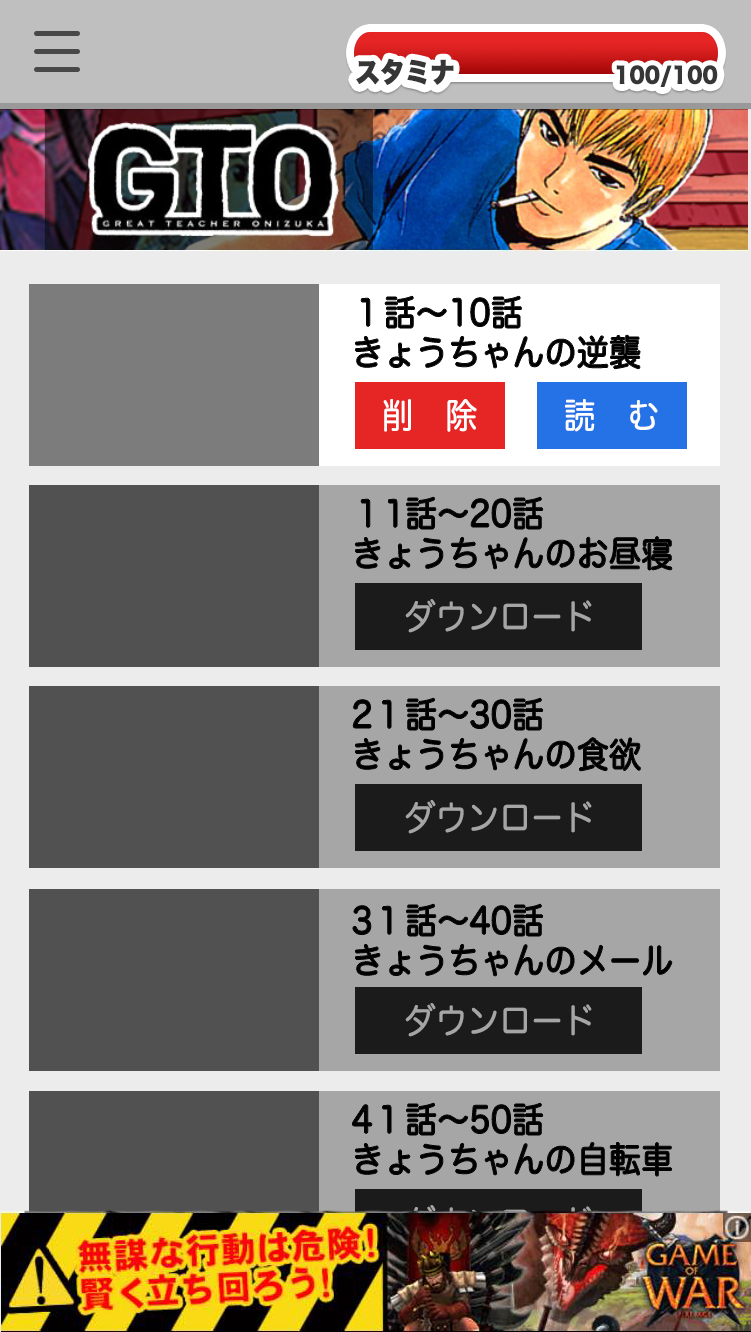
<style>
.page{position:relative;width:751px;height:1332px}
.page>*{position:absolute;margin:0}
.t1{font:27.3px "HiraKakuStdN-W8";color:#363636;font-weight:bold;scale:0.89 1}
.t2{font:21.7px "HiraKakuStdN-W8";color:#363636;font-weight:bold;scale:0.89 1}
.t3{font:35px/40px "HiraMaruProN-W4";color:#000000;font-weight:bold;scale:0.9 1}
.t4{font:34.7px "HiraMaruProN-W4";color:#fffefe;font-weight:bold;scale:0.9 1}
.t5{font:34.7px "HiraMaruProN-W4";color:#a6a5a5;font-weight:bold;scale:0.9 1}
</style>
<div class="page">
<p class="t1" style="left:356px;top:58px;width:98px;height:27px">スタミナ</p>
<p class="t2" style="left:616px;top:65px;width:102px;height:22px">100/100</p>
<p class="t3" style="left:355px;top:296px;width:285px;height:73px">１話〜10話<br>きょうちゃんの逆襲</p>
<p class="t4" style="left:383px;top:399px;width:94px;height:33px">削　除</p>
<p class="t4" style="left:565px;top:399px;width:93px;height:33px">読　む</p>
<p class="t3" style="left:355px;top:497px;width:317px;height:73px">１1話〜20話<br>きょうちゃんのお昼寝</p>
<p class="t5" style="left:405px;top:599px;width:187px;height:34px">ダウンロード</p>
<p class="t3" style="left:353px;top:698px;width:288px;height:73px">2１話〜30話<br>きょうちゃんの食欲</p>
<p class="t5" style="left:405px;top:800px;width:187px;height:34px">ダウンロード</p>
<p class="t3" style="left:353px;top:904px;width:319px;height:72px">3１話〜40話<br>きょうちゃんのメール</p>
<p class="t5" style="left:405px;top:1003px;width:187px;height:34px">ダウンロード</p>
<p class="t3" style="left:352px;top:1103px;width:320px;height:73px">4１話〜50話<br>きょうちゃんの自転車</p>
</div>
